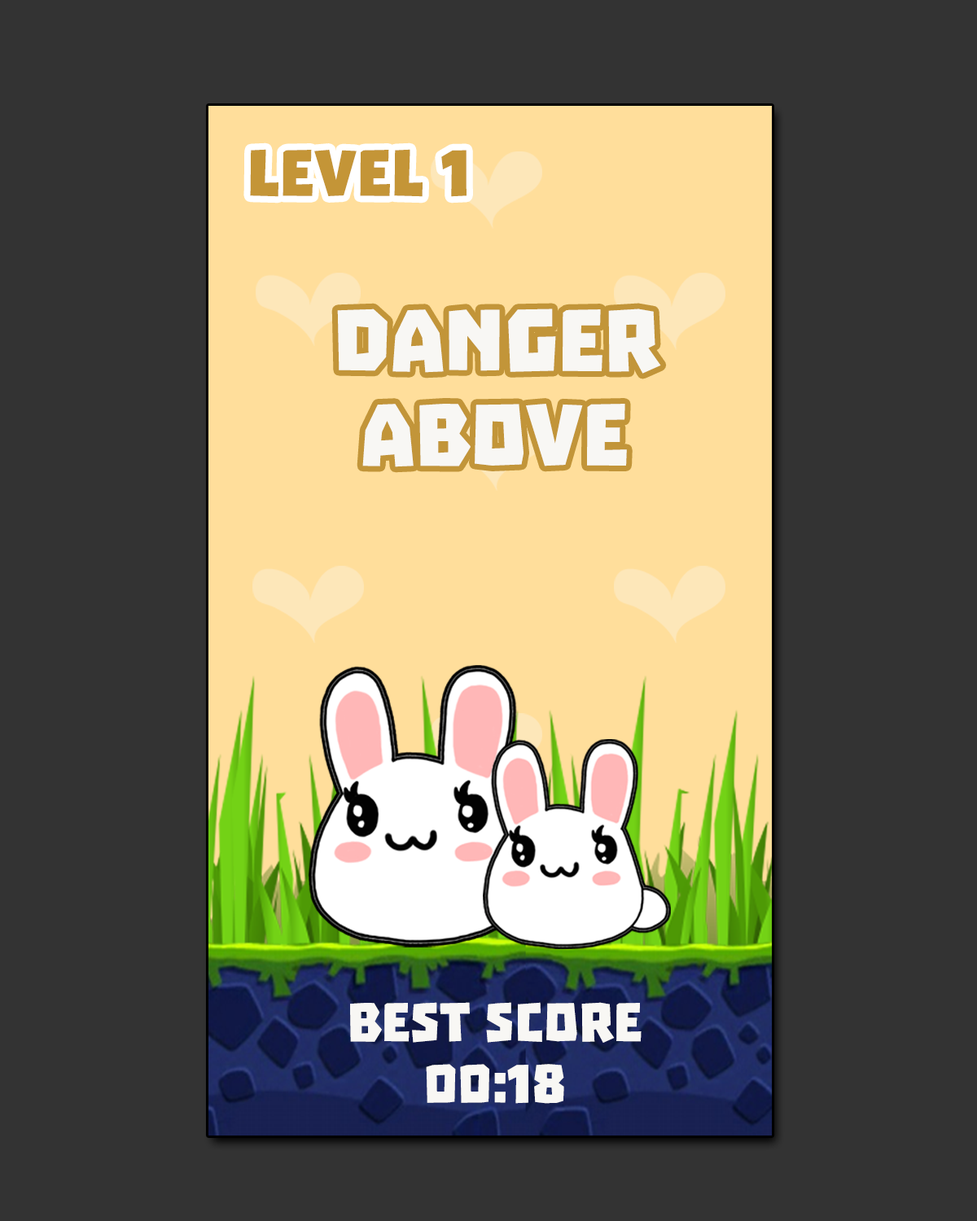
<style>
.page{position:relative;width:977px;height:1221px;background:#333333}
.page>*{position:absolute;margin:0}
.t1{font:74.1px "Troika";color:#c49537;text-transform:uppercase}
.t2{font:98.8px "Troika";color:#f8f7f4;text-transform:uppercase}
.t3{font:61.8px "Troika";color:#f8f7f4;text-transform:uppercase}
</style>
<div class="page">
<p class="t1" style="left:250px;top:149px;width:216px;height:48px">Level 1</p>
<p class="t2" style="left:337px;top:308px;width:324px;height:66px">danger</p>
<p class="t2" style="left:362px;top:404px;width:265px;height:63px">above</p>
<p class="t3" style="left:350px;top:1002px;width:291px;height:41px">best score</p>
<p class="t3" style="left:426px;top:1064px;width:138px;height:40px">00:18</p>
</div>
